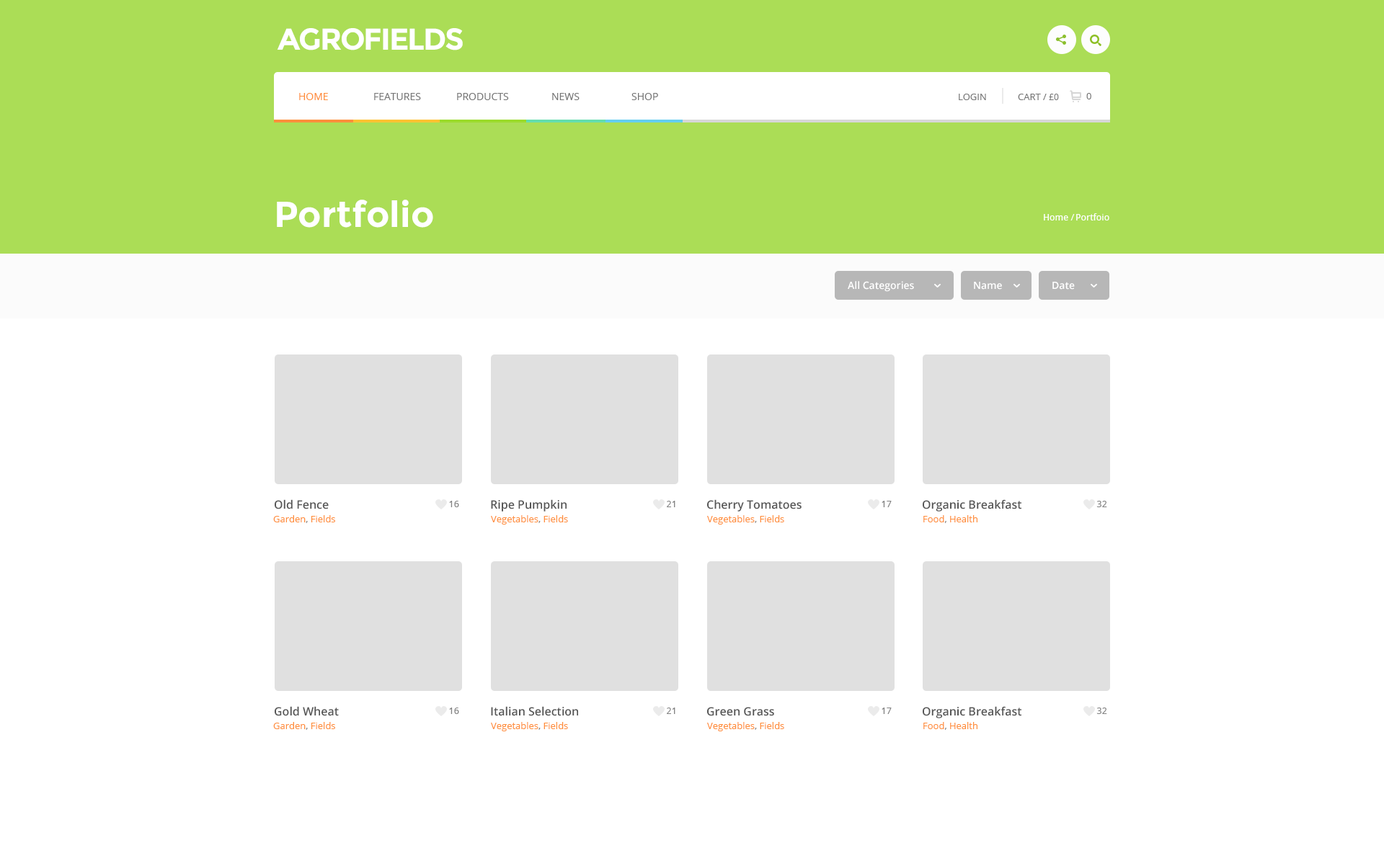
<style>
.page{position:relative;width:1384px;height:861px;background:#ffffff}
.page>*{position:absolute;margin:0}
.t1{font:30.3px "Montserrat-Bold";letter-spacing:-0.05em;color:#ffffff;text-transform:uppercase}
.t2{font:10.1px "OpenSans";color:#ff8f3c;text-transform:uppercase}
.t3{font:10.1px "OpenSans";color:#767676;text-transform:uppercase}
.t4{font:9.4px "OpenSans";color:#767676;text-transform:uppercase}
.t5{font:8.7px "OpenSans";color:#767676;text-transform:uppercase}
.t6{font:36px "Montserrat-Bold";color:#ffffff}
.t7{font:9.4px "DroidSans";color:#ffffff}
.t8{font:10.1px "OpenSans-Semibold";color:#ffffff}
.t9{font:11.5px "OpenSans-Semibold";color:#565656}
.t10{font:9.4px "DroidSans";color:#838383}
.t11{font:9.4px "OpenSans";color:#ff8f3c}
.t12{font:9.4px "OpenSans";color:#838383}
</style>
<div class="page">
<p class="t1" style="left:277px;top:28px;width:186px;height:22px">Agrofields</p>
<p class="t2" style="left:299px;top:93px;width:29px;height:7px">Home</p>
<p class="t3" style="left:374px;top:93px;width:47px;height:7px">Features</p>
<p class="t3" style="left:457px;top:93px;width:52px;height:7px">Products</p>
<p class="t3" style="left:552px;top:93px;width:28px;height:7px">News</p>
<p class="t3" style="left:632px;top:93px;width:26px;height:7px">Shop</p>
<p class="t4" style="left:959px;top:94px;width:27px;height:6px">Login</p>
<p class="t4" style="left:1018px;top:94px;width:41px;height:6px">cart / <span class="t5">£0</span></p>
<p class="t4" style="left:1086px;top:93px;width:5px;height:6px">0</p>
<p class="t6" style="left:277px;top:200px;width:156px;height:28px">Portfolio</p>
<p class="t7" style="left:1044px;top:214px;width:31px;height:7px">Home /</p>
<p class="t7" style="left:1076px;top:213px;width:33px;height:8px">Portfoio</p>
<p class="t8" style="left:848px;top:281px;width:66px;height:11px">All Categories</p>
<p class="t8" style="left:974px;top:282px;width:28px;height:8px">Name</p>
<p class="t8" style="left:1053px;top:282px;width:22px;height:8px">Date</p>
<p class="t9" style="left:275px;top:500px;width:54px;height:10px">Old Fence</p>
<p class="t10" style="left:449px;top:501px;width:10px;height:7px">16</p>
<p class="t9" style="left:491px;top:500px;width:76px;height:12px">Ripe Pumpkin</p>
<p class="t10" style="left:667px;top:501px;width:8px;height:7px">21</p>
<p class="t9" style="left:707px;top:500px;width:95px;height:12px">Cherry Tomatoes</p>
<p class="t10" style="left:882px;top:501px;width:10px;height:7px">17</p>
<p class="t9" style="left:923px;top:500px;width:99px;height:12px">Organic Breakfast</p>
<p class="t10" style="left:1097px;top:501px;width:10px;height:7px">32</p>
<p class="t11" style="left:273px;top:515px;width:62px;height:8px">Garden<span class="t12">, </span>Fields</p>
<p class="t11" style="left:491px;top:515px;width:77px;height:10px">Vegetables<span class="t12">, </span>Fields</p>
<p class="t11" style="left:707px;top:515px;width:77px;height:10px">Vegetables<span class="t12">, </span>Fields</p>
<p class="t11" style="left:923px;top:515px;width:55px;height:8px">Food<span class="t12">, </span>Health</p>
<p class="t9" style="left:275px;top:706px;width:64px;height:11px">Gold Wheat</p>
<p class="t10" style="left:449px;top:708px;width:10px;height:6px">16</p>
<p class="t9" style="left:491px;top:706px;width:87px;height:11px">Italian Selection</p>
<p class="t10" style="left:667px;top:708px;width:8px;height:6px">21</p>
<p class="t9" style="left:707px;top:707px;width:67px;height:10px">Green Grass</p>
<p class="t10" style="left:882px;top:708px;width:10px;height:6px">17</p>
<p class="t9" style="left:923px;top:706px;width:99px;height:13px">Organic Breakfast</p>
<p class="t10" style="left:1097px;top:708px;width:10px;height:6px">32</p>
<p class="t11" style="left:273px;top:722px;width:62px;height:8px">Garden<span class="t12">, </span>Fields</p>
<p class="t11" style="left:491px;top:722px;width:77px;height:10px">Vegetables<span class="t12">, </span>Fields</p>
<p class="t11" style="left:707px;top:722px;width:77px;height:10px">Vegetables<span class="t12">, </span>Fields</p>
<p class="t11" style="left:923px;top:722px;width:55px;height:8px">Food<span class="t12">, </span>Health</p>
</div>
